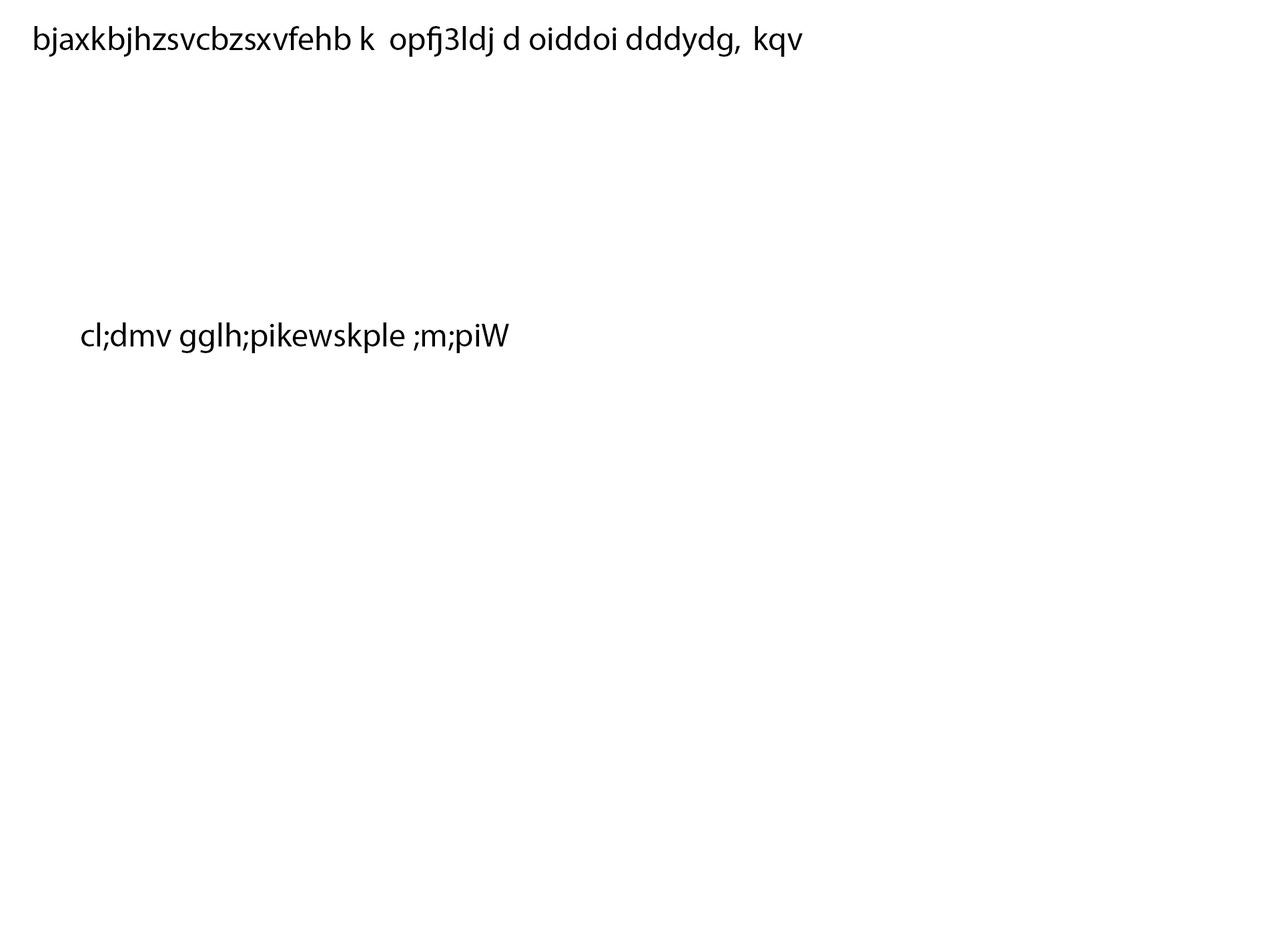
<style>
.page{position:relative;width:1261px;height:946px;background:#ffffff}
.page>*{position:absolute;margin:0}
.t1{font:33.4px "MyriadPro-Regular";color:#000000}
</style>
<div class="page">
<p class="t1" style="left:34px;top:26px;width:769px;height:31px">bjaxkbjhzsvcbzsxvfehb k  opfj3ldj d oiddoi dddydg, kqv</p>
<p class="t1" style="left:81px;top:322px;width:428px;height:31px">cl;dmv gglh;pikewskple ;m;piW</p>
</div>
